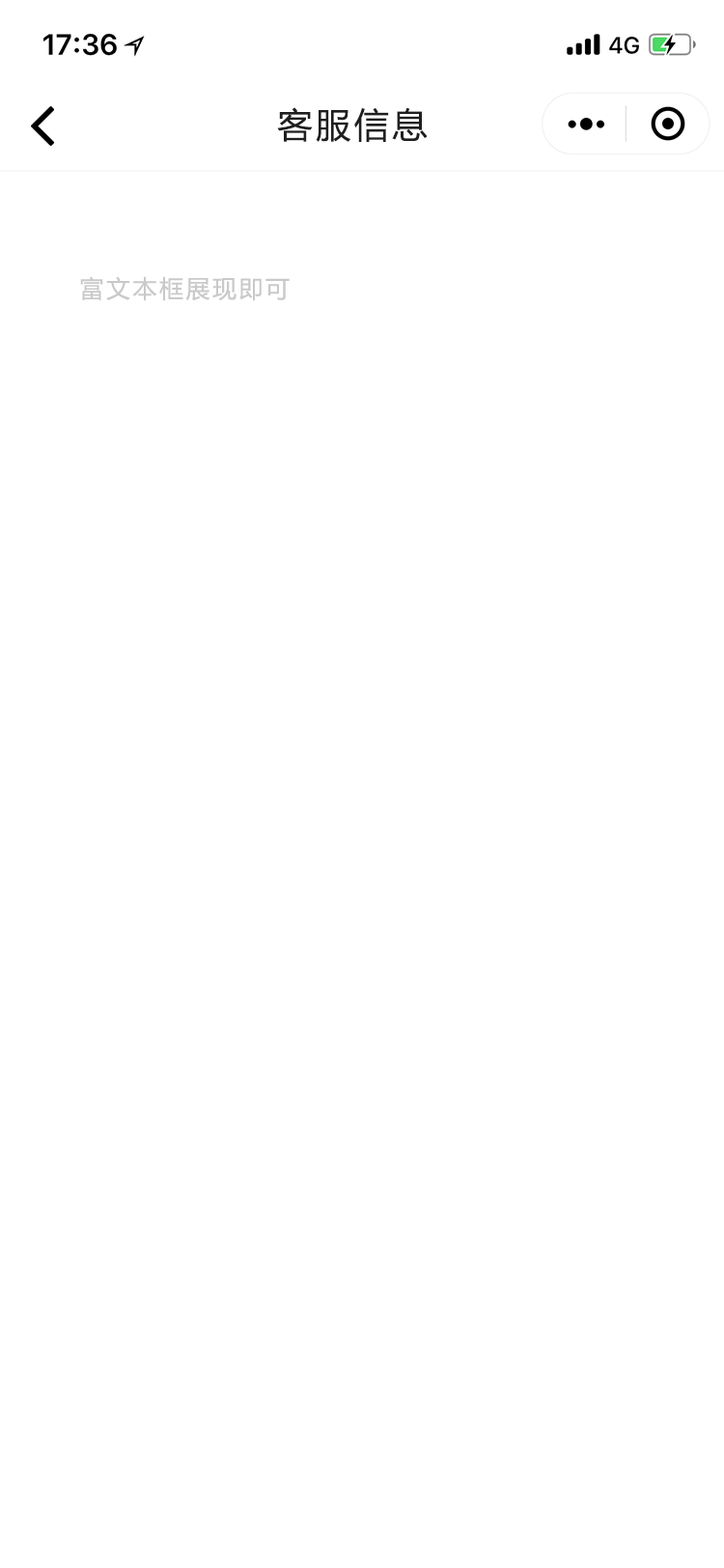
<style>
.page{position:relative;width:724px;height:1568px;background:#ffffff}
.page>*{position:absolute;margin:0}
.t1{font:34.8px "MicrosoftYaHei";letter-spacing:0.1em;color:#201f20}
.t2{font:24.1px "MicrosoftYaHei";letter-spacing:0.1em;color:#cac9c9}
</style>
<div class="page">
<p class="t1" style="left:277px;top:107px;width:151px;height:35px">客服信息</p>
<p class="t2" style="left:80px;top:276px;width:210px;height:25px">富文本框展现即可</p>
</div>
